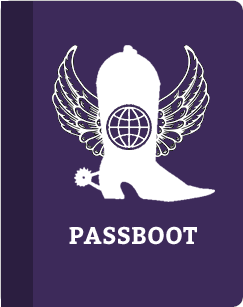
<style>
.page{position:relative;width:243px;height:307px;background:#3d2a5a}
.page>*{position:absolute;margin:0}
.t1{font:24px "Bitter-Bold";color:#ffffff}
</style>
<div class="page">
<p class="t1" style="left:69px;top:226px;width:128px;height:19px">PASSBOOT</p>
</div>
